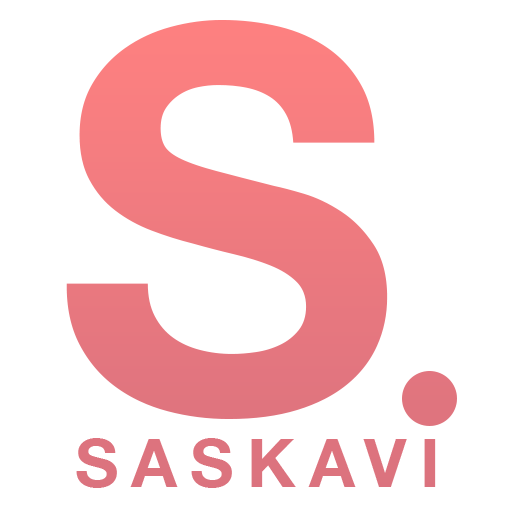
<style>
.page{position:relative;width:512px;height:512px;background:#ffffff}
.page>*{position:absolute;margin:0}
.t1{font:533.3px "HelveticaNeue-Bold";color:#ef7a7f}
.t2{font:66.7px "HelveticaNeue-Bold";letter-spacing:0.2em;color:#dc737e}
</style>
<div class="page">
<p class="t1" style="left:66px;top:20px;width:322px;height:399px">S</p>
<p class="t2" style="left:76px;top:438px;width:360px;height:50px">SASKAVI</p>
</div>
